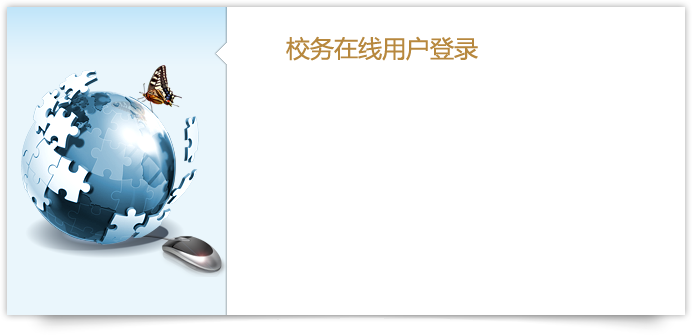
<style>
.page{position:relative;width:692px;height:336px;background:#ffffff}
.page>*{position:absolute;margin:0}
.t1{font:24px "MicrosoftYaHei";color:#b7883e}
</style>
<div class="page">
<p class="t1" style="left:286px;top:36px;width:192px;height:25px">校务在线用户登录</p>
</div>
